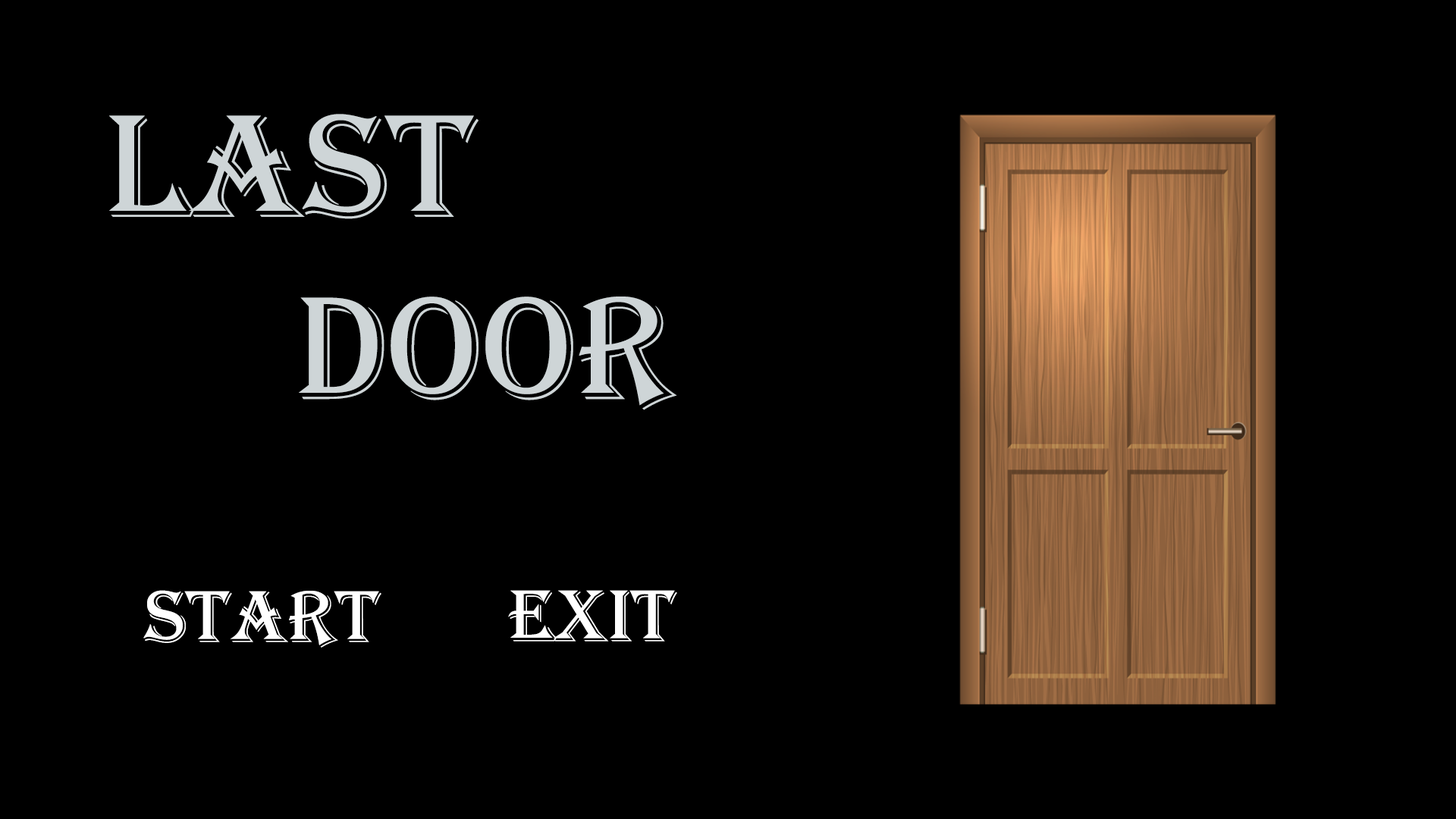
<style>
.page{position:relative;width:1456px;height:819px;background:#000000}
.page>*{position:absolute;margin:0}
.t1{font:151.7px "Algerian";color:#ced5d7}
.t2{font:75.8px "Algerian";color:#ffffff}
</style>
<div class="page">
<p class="t1" style="left:109px;top:114px;width:568px;height:296px">Last <br>     Door</p>
<p class="t2" style="left:143px;top:590px;width:238px;height:58px">start</p>
<p class="t2" style="left:508px;top:590px;width:169px;height:52px">exit</p>
</div>
